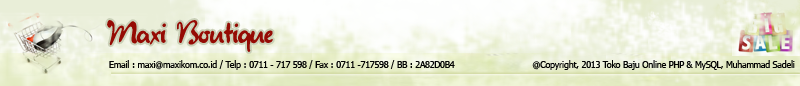
<style>
.page{position:relative;width:800px;height:86px}
.page>*{position:absolute;margin:0}
.t1{font:22.7px "Juliet";color:#950b04}
.t2{font:8.5px "Tahoma";color:#030303}
</style>
<div class="page">
<p class="t1" style="left:107px;top:20px;width:166px;height:32px">Maxi Boutique</p>
<p class="t2" style="left:109px;top:60px;width:346px;height:10px">Email : maxi@maxikom.co.id / Telp : 0711 - 717 598 / Fax : 0711 -717598 / BB : 2A82D0B4</p>
<p class="t2" style="left:532px;top:60px;width:263px;height:10px">@Copyright, 2013 Toko Baju Online PHP &amp; MySQL, Muhammad Sadeli</p>
</div>
